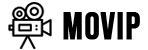
<style>
.page{position:relative;width:148px;height:50px;background:#ffffff}
.page>*{position:absolute;margin:0}
.t1{font:37.8px "BebasNeue-Regular";letter-spacing:0.01em;color:#000000;font-weight:bold}
</style>
<div class="page">
<p class="t1" style="left:63px;top:12px;width:77px;height:28px">movip</p>
</div>
